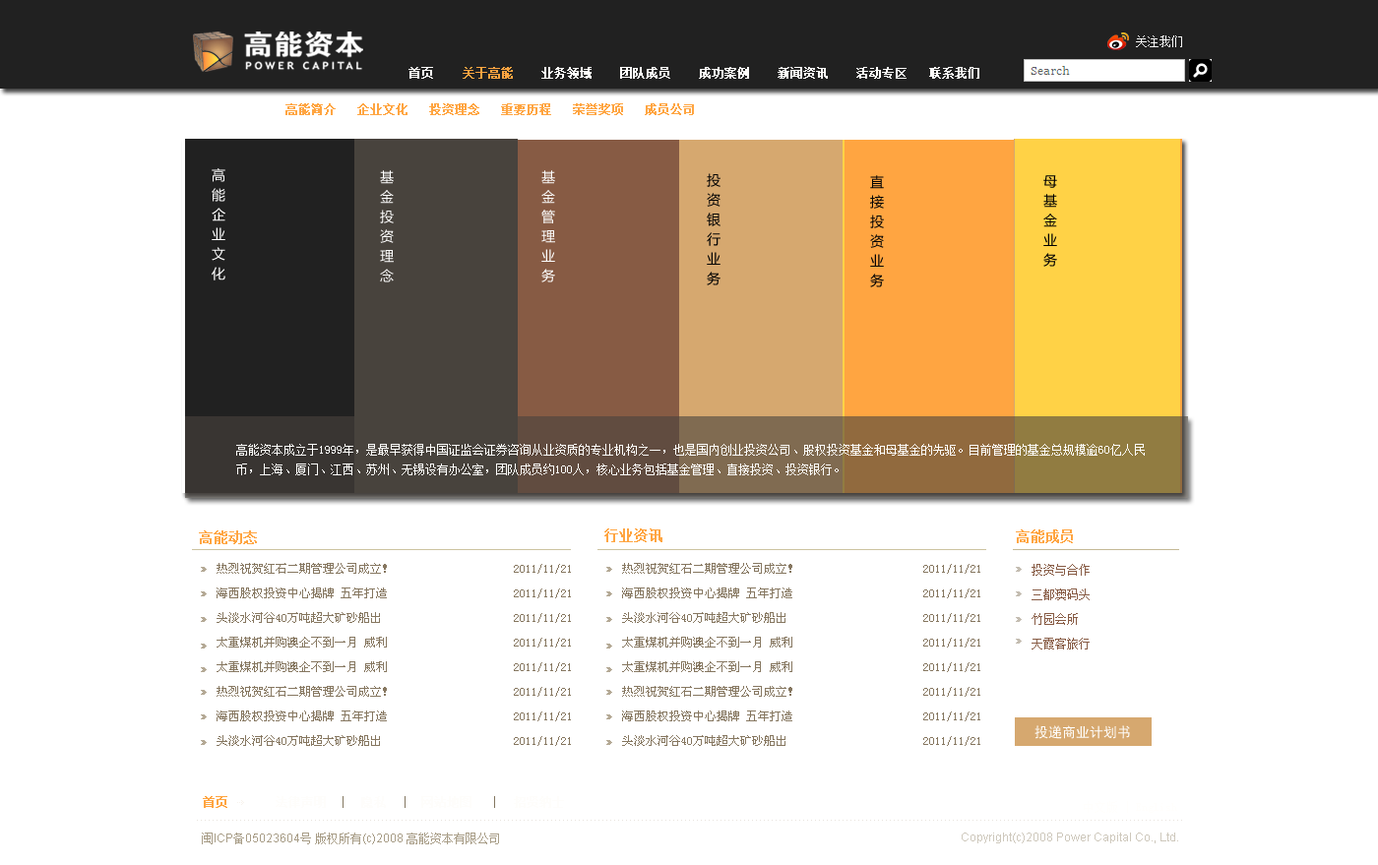
<style>
.page{position:relative;width:1378px;height:865px;background:#ffffff}
.page>*{position:absolute;margin:0}
.t1{font:11.8px "SimSun";color:#f8f8f8}
.t2{font:11.8px "SimSun";color:#fcfbf9;font-weight:bold}
.t3{font:11.8px "SimSun";color:#fffefc;font-weight:bold}
.t4{font:11.8px "SimSun";color:#ffa541;font-weight:bold}
.t5{font:13.8px/19.7px "MicrosoftYaHei";color:#ffffff}
.t6{font:13.8px/19.7px "MicrosoftYaHei";color:#fcfdfd}
.t7{font:13.8px/19.7px "MicrosoftYaHei";color:#040404}
.t8{font:13.8px/19.7px "MicrosoftYaHei";color:#050505}
.t9{font:13.8px/19.7px "MicrosoftYaHei";color:#020202}
.t10{font:11.8px/19.7px "SimSun";color:#fdfdfb}
.t11{font:13.8px "SimSun";color:#ffa541;font-weight:bold}
.t12{font:11.8px/24.6px "SimSun";color:#875b44}
.t13{font:13.8px "SimHei";color:#fefdfb}
.t14{font:11.8px "ArialMT";color:#a89d87}
.t15{font:11.8px "SimSun";color:#a89d87}
.t16{font:11.8px "ArialMT";color:#cec8bc}
</style>
<div class="page">
<p class="t1" style="left:1136px;top:35px;width:46px;height:12px">关注我们</p>
<p class="t2" style="left:409px;top:67px;width:24px;height:12px">首页</p>
<p class="t3" style="left:463px;top:67px;width:444px;height:12px"><span class="t4">关于高能</span>    业务领域    团队成员    成功案例    新闻资讯    活动专区</p>
<p class="t2" style="left:929px;top:67px;width:50px;height:12px">联系我们</p>
<p class="t4" style="left:285px;top:103px;width:409px;height:12px">高能简介   企业文化   投资理念   重要历程   荣誉奖项   成员公司</p>
<p class="t5" style="left:212px;top:168px;width:13px;height:113px">高<br>能<br>企<br>业<br>文<br>化</p>
<p class="t5" style="left:380px;top:170px;width:14px;height:113px">基<br>金<br>投<br>资<br>理<br>念</p>
<p class="t6" style="left:541px;top:170px;width:14px;height:113px">基<br>金<br>管<br>理<br>业<br>务</p>
<p class="t7" style="left:707px;top:173px;width:14px;height:112px">投<br>资<br>银<br>行<br>业<br>务</p>
<p class="t8" style="left:870px;top:175px;width:14px;height:112px">直<br>接<br>投<br>资<br>业<br>务</p>
<p class="t9" style="left:1043px;top:175px;width:14px;height:92px">母<br>基<br>金<br>业<br>务</p>
<p class="t10" style="left:236px;top:444px;width:909px;height:31px">高能资本成立于1999年，是最早获得中国证监会证券咨询从业资质的专业机构之一，也是国内创业投资公司、股权投资基金和母基金的先驱。目前管理的基金总规模逾60亿人民<br>币，上海、厦门、江西、苏州、无锡设有办公室，团队成员约100人，核心业务包括基金管理、直接投资、投资银行。</p>
<p class="t11" style="left:199px;top:531px;width:58px;height:13px">高能动态</p>
<p class="t11" style="left:604px;top:529px;width:58px;height:13px">行业资讯</p>
<p class="t11" style="left:1016px;top:530px;width:57px;height:13px">高能成员</p>
<p class="t12" style="left:1032px;top:564px;width:58px;height:86px">投资与合作 <br>三都澳码头 <br>竹园会所 <br>天霞客旅行</p>
<p class="t13" style="left:1035px;top:725px;width:95px;height:14px">投递商业计划书</p>
<p class="t4" style="left:203px;top:796px;width:24px;height:12px">首页</p>
<p class="t14" style="left:202px;top:833px;width:297px;height:12px"><span class="t15">闽</span>ICP<span class="t15">备</span>05023604<span class="t15">号 版权所有</span>(c)2008 <span class="t15">高能资本有限公司</span></p>
<p class="t16" style="left:962px;top:833px;width:216px;height:11px">Copyright(c)2008 Power Capital Co., Ltd.</p>
</div>
